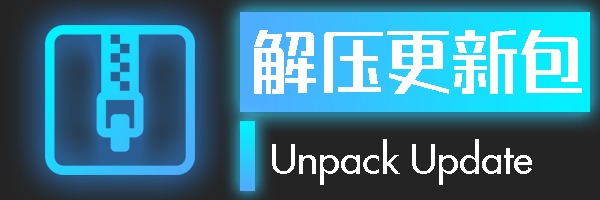
<style>
.page{position:relative;width:600px;height:200px}
.page>*{position:absolute;margin:0}
.t1{font:66.7px "REEJIZhenyanGB20GX-Medium";color:#ffffff}
.t2{font:40px "Futura-Medium";color:#ffffff}
</style>
<div class="page">
<p class="t1" style="left:254px;top:30px;width:328px;height:64px">解压更新包</p>
<p class="t2" style="left:272px;top:139px;width:260px;height:46px">Unpack Update</p>
</div>
